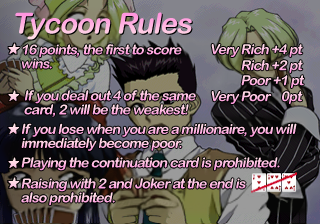
<style>
.page{position:relative;width:320px;height:224px}
.page>*{position:absolute;margin:0}
.t1{font:29px "ArialRoundedMTBold";letter-spacing:-0.025em;font-style:italic}
.t2{font:14px/14px "ArialRoundedMTBold";letter-spacing:-0.05em;font-style:italic}
.t3{font:14px "ArialRoundedMTBold";letter-spacing:-0.05em;color:#ffbde2;font-style:italic}
.t4{font:14px "ArialRoundedMTBold";letter-spacing:-0.05em;font-style:italic}
.t5{font:14px/14px "ArialRoundedMTBold";letter-spacing:-0.05em;color:#ffb8e2;font-style:italic}
.t6{font:14px/14px "ArialRoundedMTBold";letter-spacing:-0.05em;color:#ffc2e3;font-style:italic}
</style>
<div class="page">
<p class="t1" style="left:15px;top:12px;width:177px;height:28px">Tycoon Rules</p>
<p class="t2" style="left:22px;top:44px;width:160px;height:25px">16 points, the first to score<br>wins.</p>
<p class="t3" style="left:211px;top:44px;width:92px;height:13px">Very Rich +4 pt</p>
<p class="t4" style="left:241px;top:60px;width:62px;height:13px">Rich +2 pt</p>
<p class="t4" style="left:241px;top:75px;width:64px;height:13px">Poor +1 pt</p>
<p class="t5" style="left:24px;top:90px;width:172px;height:27px">If you deal out 4 of the same <br>card, 2 will be the weakest!</p>
<p class="t3" style="left:211px;top:91px;width:92px;height:13px">Very Poor    0pt</p>
<p class="t6" style="left:21px;top:123px;width:276px;height:28px">If you lose when you are a millionaire, you will immediately become poor.</p>
<p class="t3" style="left:21px;top:157px;width:259px;height:14px">Playing the continuation card is prohibited.</p>
<p class="t2" style="left:21px;top:178px;width:225px;height:28px">Raising with 2 and Joker at the end is also prohibited.</p>
</div>
